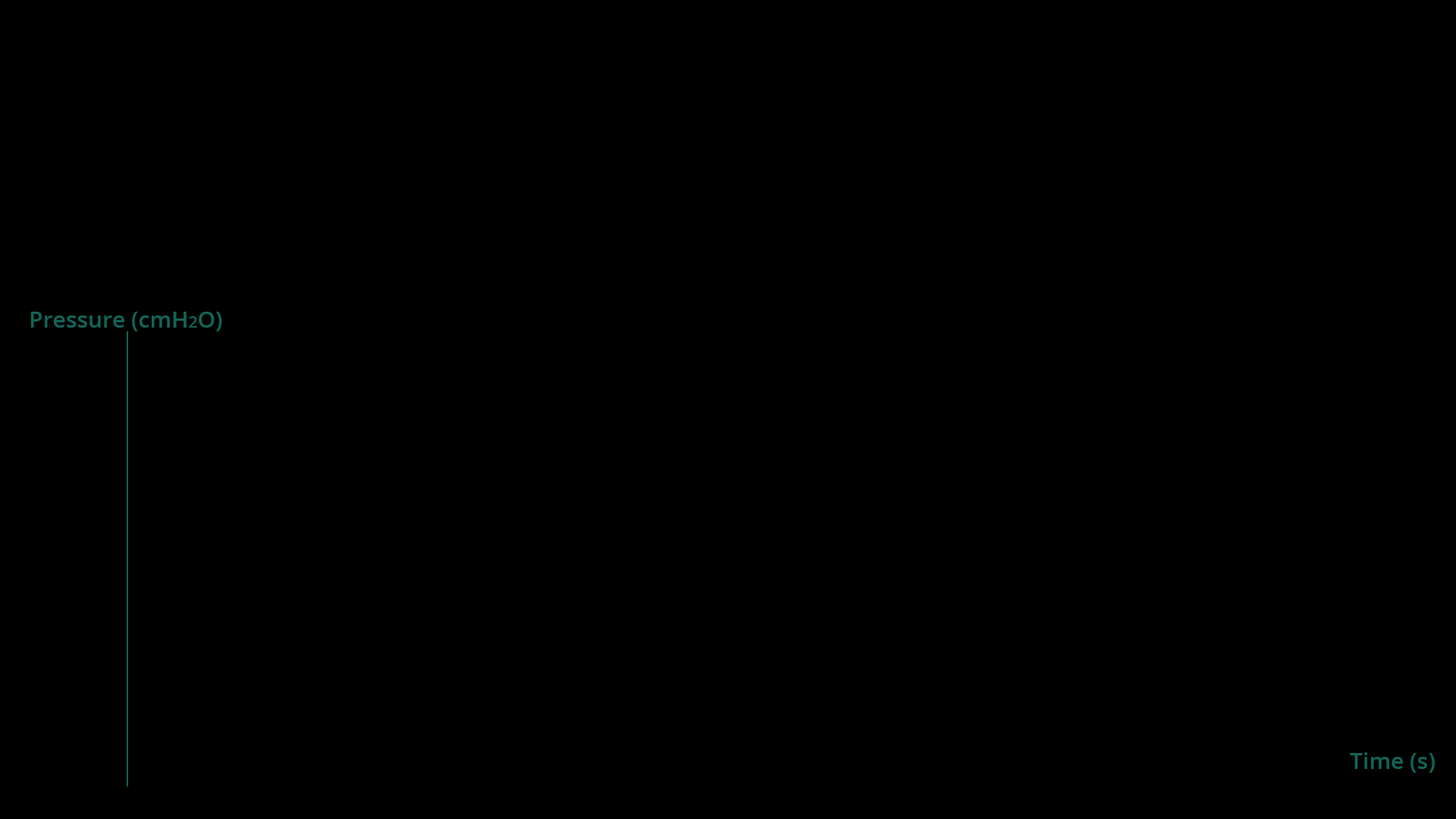
<style>
.page{position:relative;width:1456px;height:819px;background:#000000}
.page>*{position:absolute;margin:0}
.t1{font:22.7px "OpenSans-Semibold";color:#126456}
.t2{font:15.9px "OpenSans-Semibold";color:#126456}
</style>
<div class="page">
<p class="t1" style="left:30px;top:312px;width:192px;height:19px">Pressure (cmH<span class="t2">2</span>O)</p>
<p class="t1" style="left:1350px;top:752px;width:85px;height:21px">Time (s)</p>
</div>
